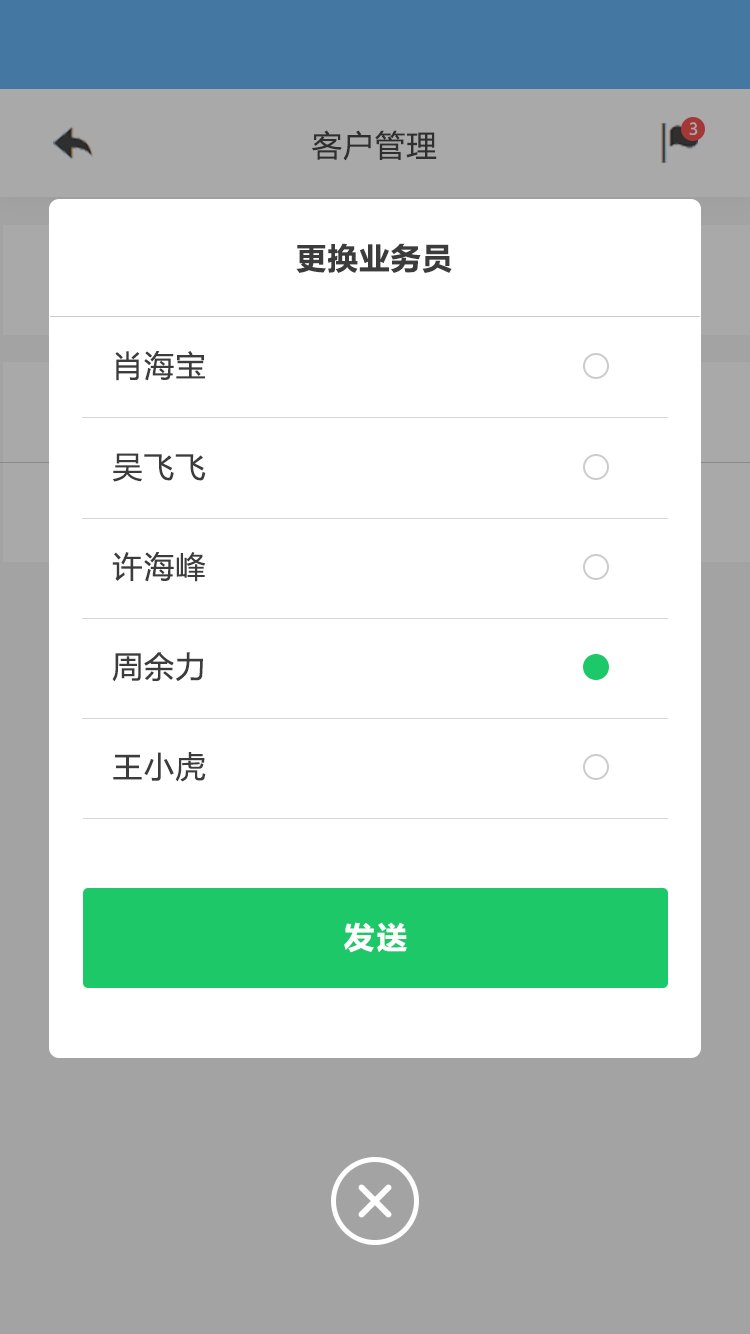
<style>
.page{position:relative;width:750px;height:1334px;background:#ffffff}
.page>*{position:absolute;margin:0}
.t1{font:16px "MicrosoftYaHeiUI";color:#a9a9a9}
.t2{font:30px "MicrosoftYaHeiUI";letter-spacing:0.05em;color:#333333}
.t3{font:30px "MicrosoftYaHeiUI-Bold";letter-spacing:0.05em;color:#3c3c3c}
.t4{font:30px "MicrosoftYaHeiUI";letter-spacing:0.05em;color:#3c3c3c}
.t5{font:30px "MicrosoftYaHeiUI-Bold";letter-spacing:0.1em;color:#ffffff}
</style>
<div class="page">
<p class="t1" style="left:689px;top:122px;width:9px;height:13px">3</p>
<p class="t2" style="left:312px;top:130px;width:125px;height:31px">客户管理</p>
<p class="t3" style="left:296px;top:243px;width:156px;height:30px">更换业务员</p>
<p class="t4" style="left:115px;top:351px;width:90px;height:30px">肖海宝</p>
<p class="t4" style="left:113px;top:453px;width:93px;height:29px">吴飞飞</p>
<p class="t4" style="left:112px;top:552px;width:94px;height:30px">许海峰</p>
<p class="t4" style="left:112px;top:652px;width:91px;height:30px">周余力</p>
<p class="t4" style="left:113px;top:752px;width:93px;height:30px">王小虎</p>
<p class="t5" style="left:344px;top:922px;width:63px;height:31px">发送</p>
</div>
